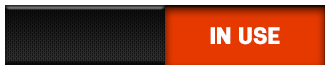
<style>
.page{position:relative;width:331px;height:70px;background:#e63900}
.page>*{position:absolute;margin:0}
.t1{font:24px "Antartida-Black";color:#ffffff}
</style>
<div class="page">
<p class="t1" style="left:210px;top:27px;width:70px;height:18px">IN USE</p>
</div>
